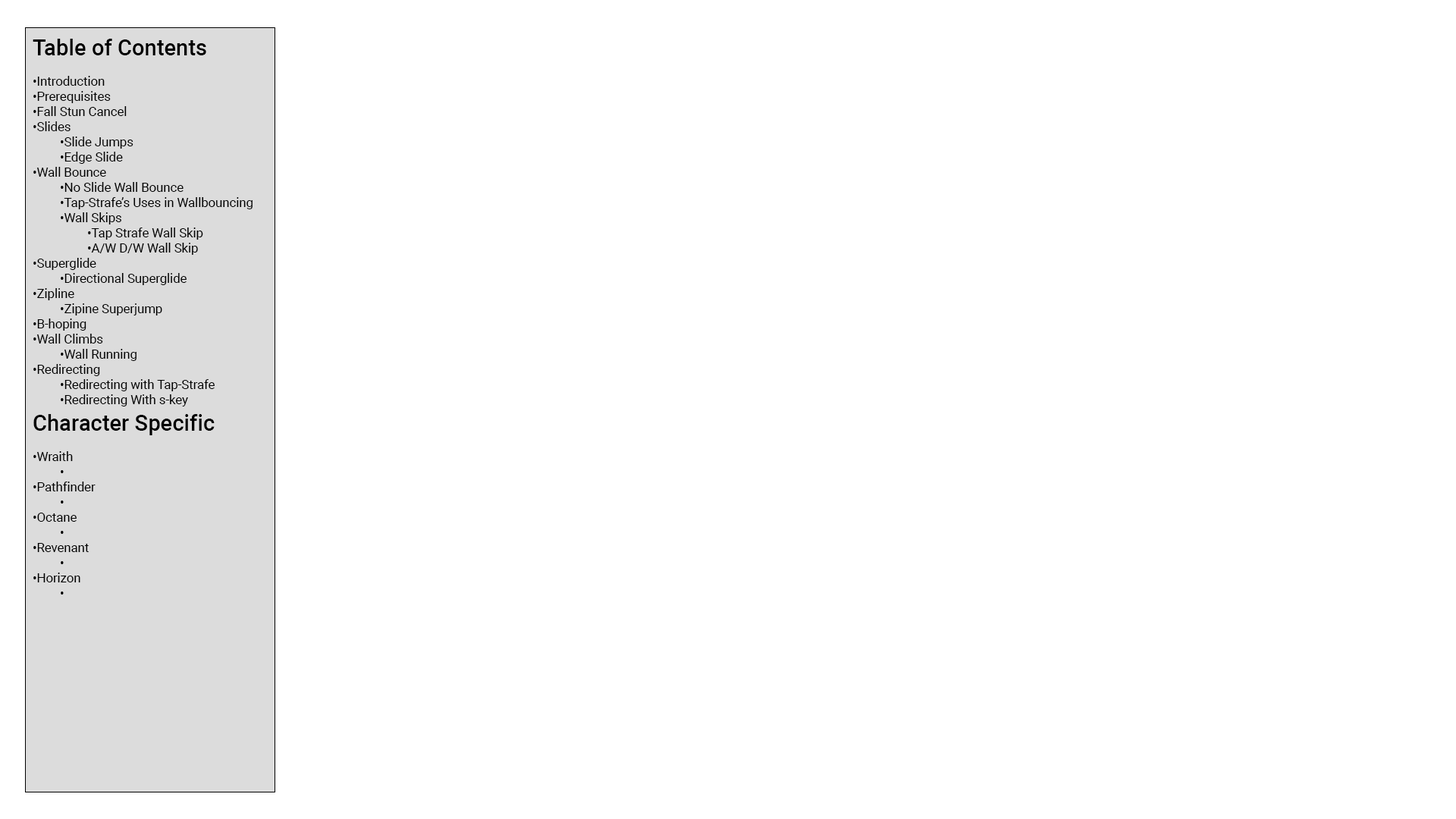
<style>
.page{position:relative;width:1456px;height:819px;background:#ffffff}
.page>*{position:absolute;margin:0}
.t1{font:12.6px "Roboto-Regular";color:#000000}
.t2{font:22.1px "Roboto-Medium";color:#000000}
</style>
<div class="page">
<p class="t1" style="left:33px;top:39px;width:220px;height:556px"><span class="t2">Table of Contents<br><br></span>•Introduction<br>•Prerequisites<br>•Fall Stun Cancel<br>•Slides<br> •Slide Jumps<br> •Edge Slide<br>•Wall Bounce<br> •No Slide Wall Bounce<br> •Tap-Strafe’s Uses in Wallbouncing<br> •Wall Skips<br>  •Tap Strafe Wall Skip<br>  •A/W D/W Wall Skip<br>•Superglide<br> •Directional Superglide<br>•Zipline<br> •Zipine Superjump<br>•B-hoping<br>•Wall Climbs<br> •Wall Running<br>•Redirecting<br> •Redirecting with Tap-Strafe<br> •Redirecting With s-key<br><span class="t2">Character Specific<br><br></span>•Wraith<br> •<br>•Pathfinder<br> •<br>•Octane<br> •<br>•Revenant<br> •<br>•Horizon<br> •</p>
</div>
